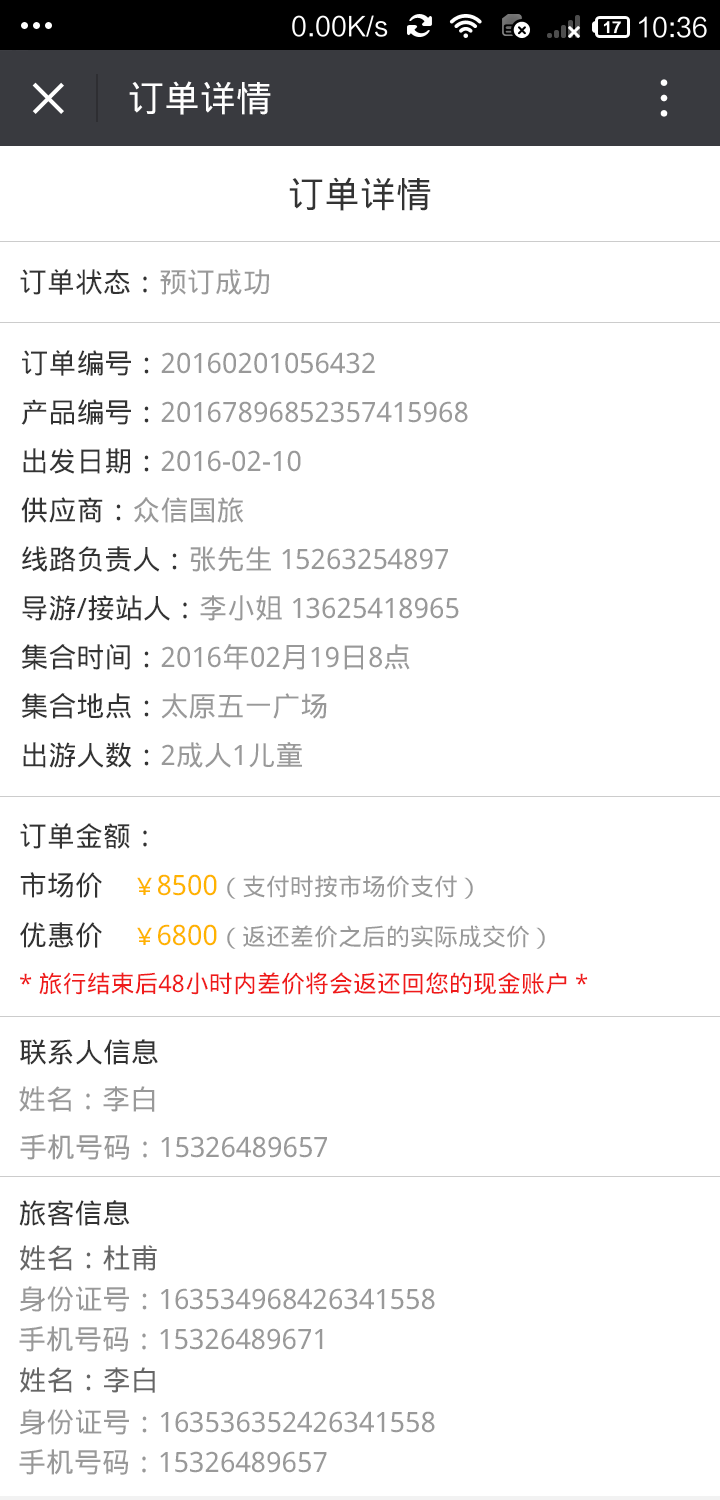
<style>
.page{position:relative;width:720px;height:1500px;background:#ffffff}
.page>*{position:absolute;margin:0}
.t1{font:36px "DroidSansFallback";color:#fefefe}
.t2{font:36px "DroidSansFallback";color:#333333}
.t3{font:28px "DroidSansFallback";color:#333333}
.t4{font:28px "DroidSansFallback";color:#999999}
.t5{font:24px "DroidSansFallback";color:#ef1a1a}
.t6{font:24px "DroidSansFallback";color:#ffb300}
.t7{font:28px "DroidSansFallback";color:#ffb300}
.t8{font:24px/50px "DroidSansFallback";color:#999999}
.t9{font:28px "DroidSansFallback";color:#666666}
</style>
<div class="page">
<p class="t1" style="left:129px;top:81px;width:142px;height:34px">订单详情</p>
<p class="t2" style="left:289px;top:177px;width:142px;height:34px">订单详情</p>
<p class="t3" style="left:20px;top:269px;width:249px;height:26px">订单状态：<span class="t4">预订成功</span></p>
<p class="t4" style="left:21px;top:350px;width:447px;height:418px;text-align:justify"><span class="t3">订单编号：</span>20160201056432<br><span class="t3">产品编号：</span>20167896852357415968<br><span class="t3">出发日期：</span>2016-02-10<br><span class="t3">供应商：</span>众信国旅<br><span class="t3">线路负责人：</span>张先生 15263254897<br><span class="t3">导游/接站人：</span>李小姐 13625418965<br><span class="t3">集合时间：</span>2016年02月19日8点<br><span class="t3">集合地点：</span>太原五一广场<br><span class="t3">出游人数：</span>2成人1儿童</p>
<p class="t5" style="left:20px;top:823px;width:568px;height:172px"><span class="t3">订单金额：<br>市场价    </span><span class="t6">￥</span><span class="t7">8500</span><span class="t8">（支付时按市场价支付）<br></span><span class="t3">优惠价    </span><span class="t6">￥</span><span class="t7">6800</span><span class="t8">（返还差价之后的实际成交价）<br></span>* 旅行结束后48小时内差价将会返还回您的现金账户 *</p>
<p class="t3" style="left:20px;top:1039px;width:138px;height:26px">联系人信息</p>
<p class="t4" style="left:19px;top:1086px;width:136px;height:26px">姓名：李白</p>
<p class="t4" style="left:20px;top:1134px;width:307px;height:26px">手机号码：15326489657</p>
<p class="t3" style="left:19px;top:1200px;width:111px;height:26px">旅客信息</p>
<p class="t9" style="left:20px;top:1245px;width:137px;height:26px">姓名：杜甫</p>
<p class="t4" style="left:20px;top:1286px;width:415px;height:26px">身份证号：163534968426341558</p>
<p class="t4" style="left:19px;top:1326px;width:304px;height:26px">手机号码：15326489671</p>
<p class="t9" style="left:20px;top:1367px;width:135px;height:26px">姓名：李白</p>
<p class="t4" style="left:20px;top:1409px;width:415px;height:26px">身份证号：163536352426341558</p>
<p class="t4" style="left:19px;top:1449px;width:308px;height:26px">手机号码：15326489657</p>
</div>
